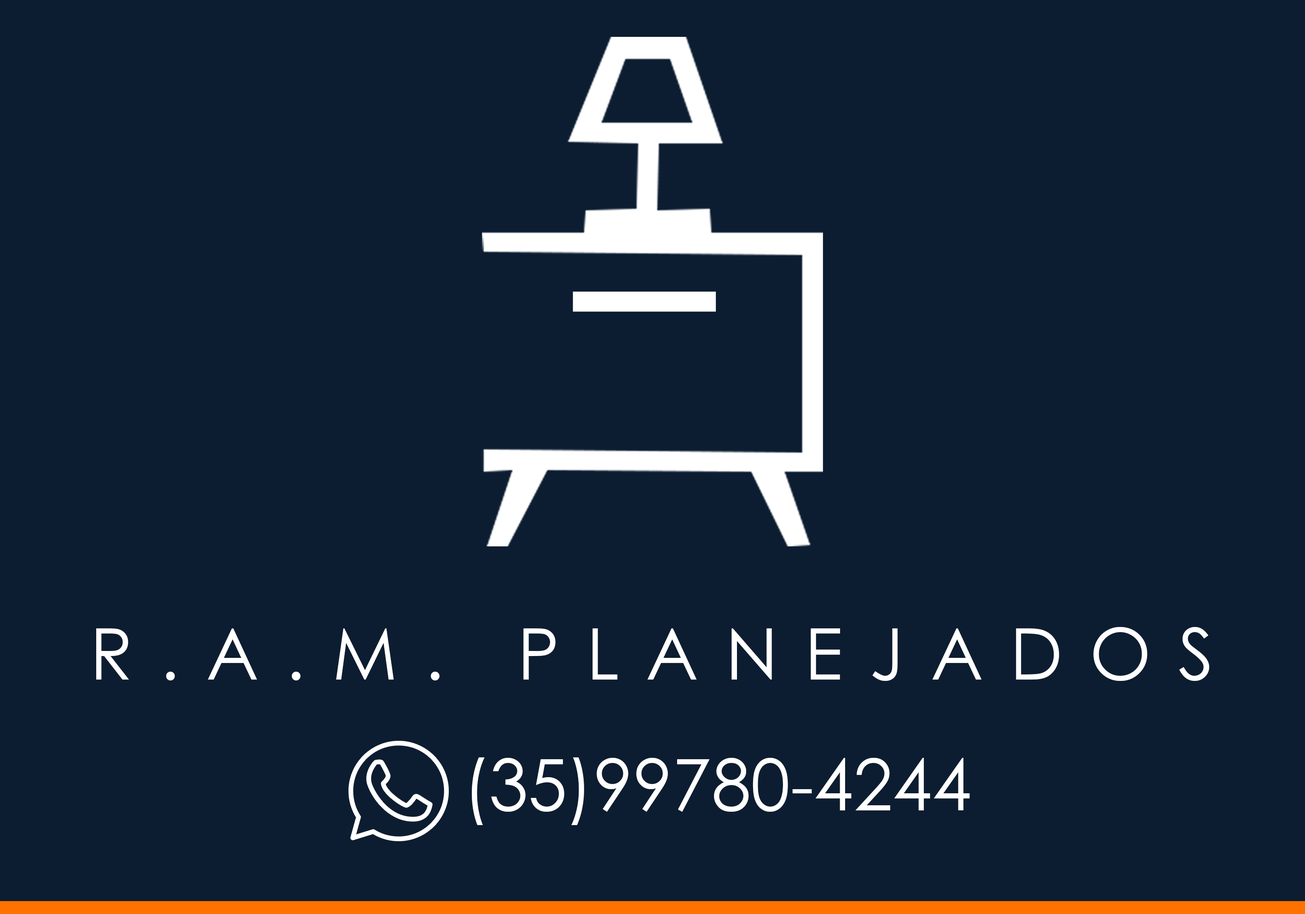
<style>
.page{position:relative;width:1305px;height:914px;background:#0c1d31}
.page>*{position:absolute;margin:0}
.t1{font:70.9px "CenturyGothic";letter-spacing:0.38em;color:#ffffff}
.t2{font:71px "CenturyGothic";color:#ffffff}
</style>
<div class="page">
<p class="t1" style="left:96px;top:627px;width:1114px;height:54px">R.A.M. PLANEJADOS</p>
<p class="t2" style="left:472px;top:757px;width:498px;height:68px">(35)99780-4244</p>
</div>
